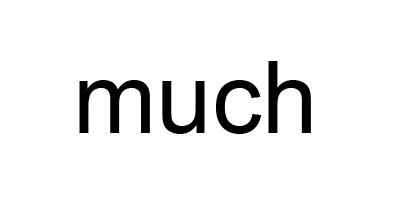
<style>
.page{position:relative;width:400px;height:200px;background:#ffffff}
.page>*{position:absolute;margin:0}
.t1{font:100px "ArialMT";color:#000000}
</style>
<div class="page">
<p class="t1" style="left:79px;top:61px;width:232px;height:73px">much</p>
</div>
